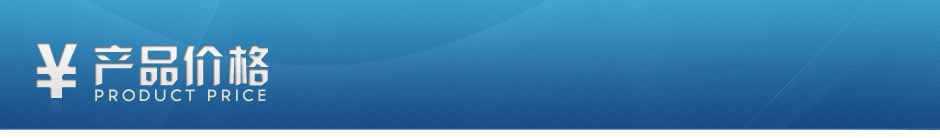
<style>
.page{position:relative;width:940px;height:138px}
.page>*{position:absolute;margin:0}
.t1{font:79.5px "FZZYJW--GB1-0";letter-spacing:0.18em;color:#e8e8e8}
.t2{font:45px "JLinXin";color:#e7e7e7}
.t3{font:15px "TYPOGRAPHPRO-SemiBold";letter-spacing:0.18em;color:#dbe0cc}
</style>
<div class="page">
<p class="t1" style="left:36px;top:43px;width:42px;height:55px">￥</p>
<p class="t2" style="left:94px;top:44px;width:176px;height:43px">产品价格</p>
<p class="t3" style="left:95px;top:89px;width:171px;height:13px">PRODUCT PRICE</p>
</div>
